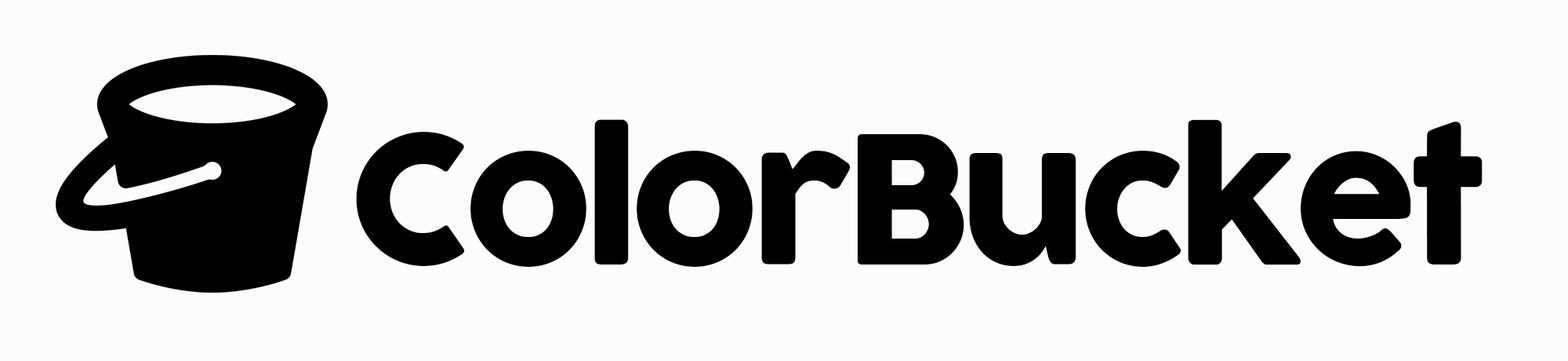
<style>
.page{position:relative;width:1568px;height:361px;background:#fcfcfc}
.page>*{position:absolute;margin:0}
.t1{font:175.7px "COCOGOOSE";letter-spacing:-0.05em;color:#000000}
</style>
<div class="page">
<p class="t1" style="left:356px;top:119px;width:1127px;height:148px">ColorBucket</p>
</div>
